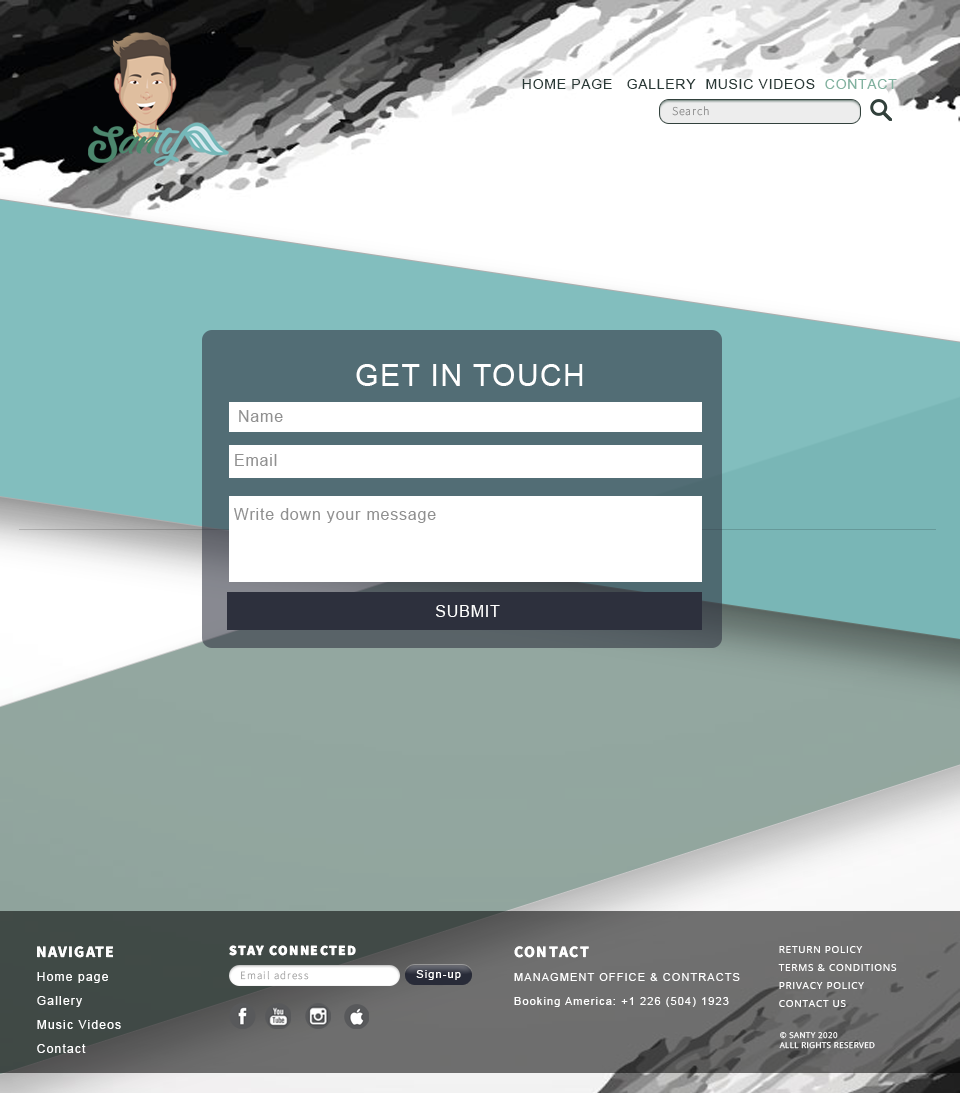
<style>
.page{position:relative;width:960px;height:1093px;background:#ffffff}
.page>*{position:absolute;margin:0}
.t1{font:14px "ArialMT";letter-spacing:0.05em;color:#2a3a37}
.t2{font:12px "SourceSansRoman-Light";letter-spacing:0.075em;color:#969696}
.t3{font:30px "ArialMT";letter-spacing:0.05em;color:#ffffff}
.t4{font:16px "ArialMT";letter-spacing:0.05em;color:#909090}
.t5{font:16px "ArialMT";letter-spacing:0.05em;color:#fdfdfd}
.t6{font:12px/24px "ArialMT";letter-spacing:0.1em;color:#ffffff}
.t7{font:16px "SourceSansRoman-Bold";letter-spacing:0.075em;color:#fefefe}
.t8{font:14px "SourceSansRoman-Black";letter-spacing:0.1em;color:#ffffff}
.t9{font:11px/24px "ArialMT";letter-spacing:0.1em;color:#ffffff}
.t10{font:16px/24px "SourceSansRoman-Bold";letter-spacing:0.1em;color:#ffffff}
.t11{font:10px/18px "OpenSans";letter-spacing:0.075em;color:#ffffff;text-transform:uppercase}
.t12{font:11px "SourceSansRoman-Light";letter-spacing:0.1em;color:#aaaaaa}
.t13{font:11px "ArialMT";letter-spacing:0.1em;color:#ffffff}
.t14{font:8px/10px "OpenSans";letter-spacing:0.05em;color:#ffffff;text-transform:uppercase}
</style>
<div class="page">
<p class="t1" style="left:522px;top:79px;width:375px;height:10px">HOME PAGE   GALLERY  MUSIC VIDEOS  CONTACT</p>
<p class="t2" style="left:672px;top:106px;width:37px;height:10px">Search</p>
<p class="t3" style="left:356px;top:364px;width:227px;height:22px">GET IN TOUCH</p>
<p class="t4" style="left:239px;top:410px;width:44px;height:12px">Name</p>
<p class="t4" style="left:235px;top:454px;width:42px;height:12px">Email</p>
<p class="t4" style="left:234px;top:508px;width:202px;height:15px">Write down your message</p>
<p class="t5" style="left:436px;top:605px;width:64px;height:12px">SUBMIT</p>
<p class="t6" style="left:37px;top:946px;width:84px;height:107px"><span class="t7">NAVIGATE<br></span>Home page<br>Gallery<br>Music Videos<br>Contact</p>
<p class="t8" style="left:229px;top:945px;width:127px;height:11px">STAY CONNECTED</p>
<p class="t9" style="left:514px;top:946px;width:226px;height:61px"><span class="t10">CONTACT<br></span>MANAGMENT OFFICE &amp; CONTRACTS<br>Booking America: +1 226 (504) 1923</p>
<p class="t11" style="left:778px;top:946px;width:119px;height:61px">RETURN POLICY<br>TERMS &amp; CONDITIONS<br>PRIVACY POLICY <br>CONTACT US</p>
<p class="t12" style="left:241px;top:971px;width:68px;height:9px">Email adress</p>
<p class="t13" style="left:416px;top:970px;width:45px;height:10px">Sign-up</p>
<p class="t14" style="left:779px;top:1032px;width:96px;height:17px">© SANTY 2020<br>Alll rights reserved</p>
</div>
